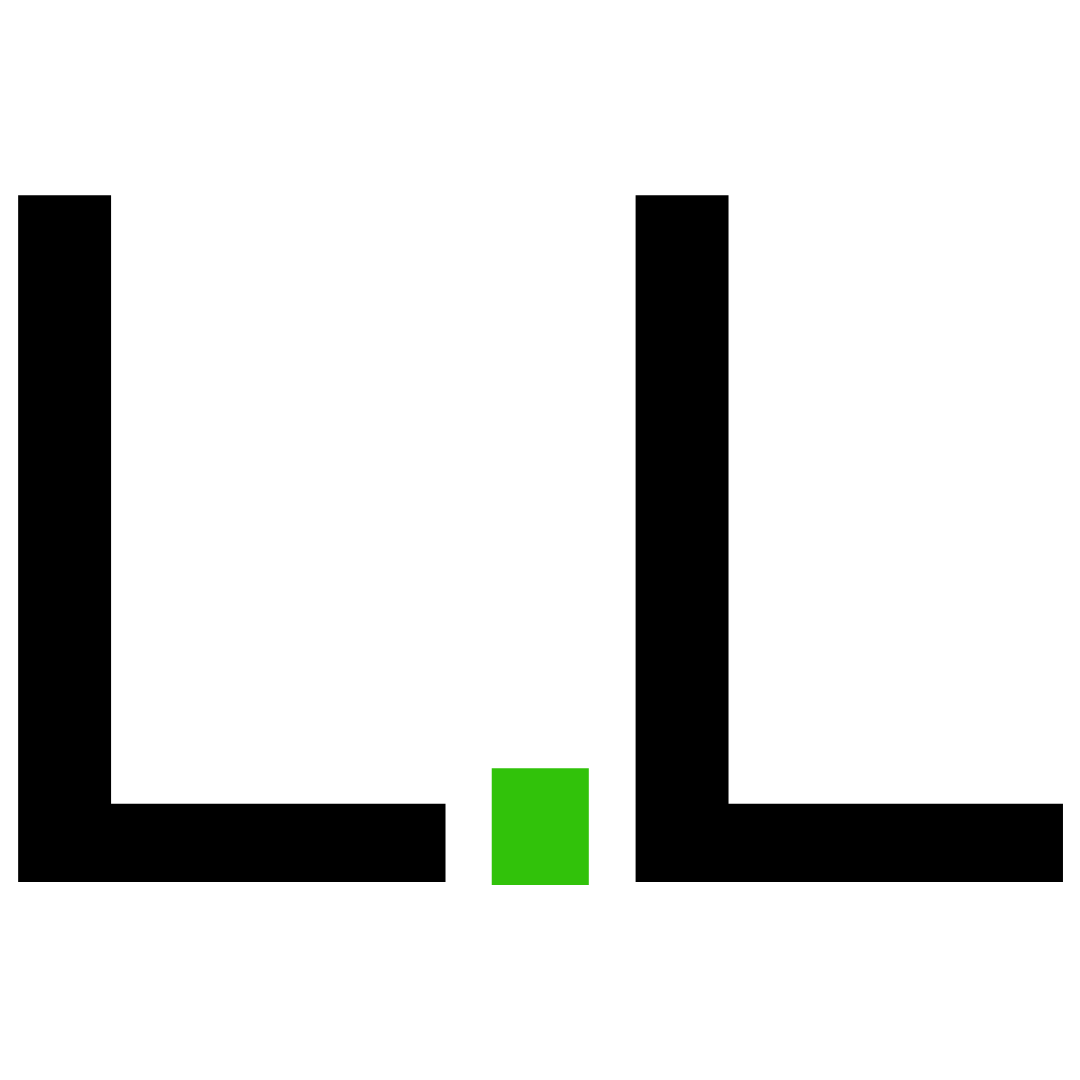
<style>
.page{position:relative;width:1080px;height:1080px;background:#ffffff}
.page>*{position:absolute;margin:0}
.t1{font:942.1px "DejaVuSans";color:#000000}
.t2{font:942.1px "DejaVuSans";color:#31c20a}
</style>
<div class="page">
<p class="t1" style="left:18px;top:195px;width:428px;height:687px">L</p>
<p class="t1" style="left:635px;top:195px;width:428px;height:687px">L</p>
<p class="t2" style="left:491px;top:768px;width:98px;height:117px">.</p>
</div>
